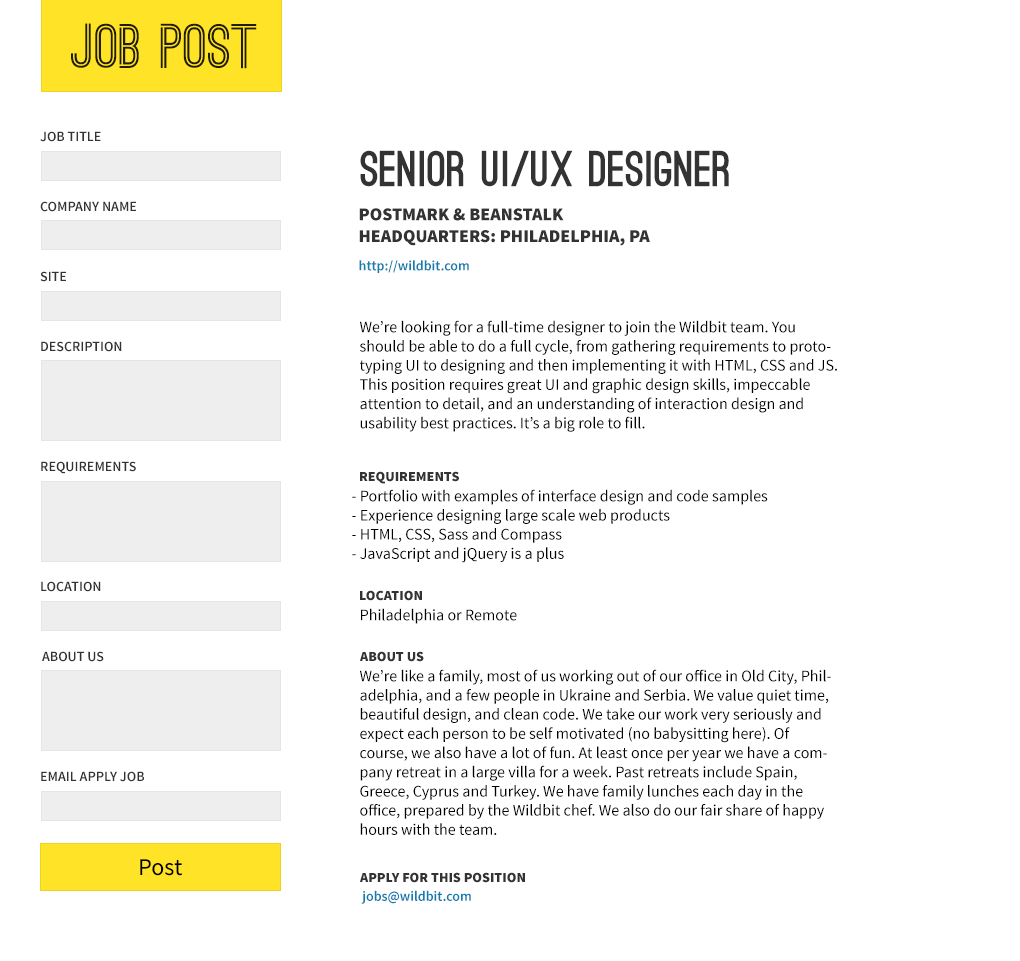
<style>
.page{position:relative;width:1020px;height:961px;background:#ffffff}
.page>*{position:absolute;margin:0}
.t1{font:60px "OstrichSans-Bold";color:#201c05}
.t2{font:14px "SourceSansPro-Semibold";color:#333333;text-transform:uppercase}
.t3{font:48px "OstrichSans-Black";color:#333333;text-transform:uppercase}
.t4{font:18px "SourceSansPro-Black";color:#333333;text-transform:uppercase}
.t5{font:14px "SourceSansPro-Semibold";color:#107caf}
.t6{font:16px "SourceSansPro-Regular";color:#000000}
.t7{font:14px "SourceSansPro-Black";color:#333333;text-transform:uppercase}
.t8{font:24px "SourceSansPro-Regular";color:#000000}
</style>
<div class="page">
<p class="t1" style="left:71px;top:23px;width:186px;height:46px">JOB POST</p>
<p class="t2" style="left:40px;top:131px;width:61px;height:11px">Job title</p>
<p class="t3" style="left:360px;top:150px;width:369px;height:37px">Senior UI/UX Designer</p>
<p class="t2" style="left:40px;top:201px;width:96px;height:11px">Company name</p>
<p class="t4" style="left:359px;top:208px;width:291px;height:38px">Postmark &amp; Beanstalk<br>Headquarters: Philadelphia, PA</p>
<p class="t5" style="left:359px;top:260px;width:110px;height:13px">http://wildbit.com</p>
<p class="t2" style="left:40px;top:271px;width:26px;height:11px">site</p>
<p class="t6" style="left:359px;top:320px;width:478px;height:112px">We’re looking for a full-time designer to join the Wildbit team. You should be able to do a full cycle, from gathering requirements to prototyping UI to designing and then implementing it with HTML, CSS and JS. This position requires great UI and graphic design skills, impeccable attention to detail, and an understanding of interaction design and usability best practices. It’s a big role to fill.</p>
<p class="t2" style="left:41px;top:341px;width:81px;height:11px">description</p>
<p class="t2" style="left:41px;top:461px;width:95px;height:13px">requirements</p>
<p class="t7" style="left:360px;top:471px;width:99px;height:13px">requirements</p>
<p class="t6" style="left:352px;top:489px;width:416px;height:74px">- Portfolio with examples of interface design and code samples<br>- Experience designing large scale web products<br>- HTML, CSS, Sass and Compass<br>- JavaScript and jQuery is a plus</p>
<p class="t2" style="left:41px;top:581px;width:60px;height:11px">location</p>
<p class="t7" style="left:360px;top:590px;width:62px;height:11px">location</p>
<p class="t6" style="left:361px;top:608px;width:156px;height:16px">Philadelphia or Remote</p>
<p class="t2" style="left:42px;top:651px;width:62px;height:11px">about us</p>
<p class="t7" style="left:359px;top:651px;width:65px;height:11px">about us</p>
<p class="t6" style="left:359px;top:669px;width:472px;height:166px">We’re like a family, most of us working out of our office in Old City, Philadelphia, and a few people in Ukraine and Serbia. We value quiet time, beautiful design, and clean code. We take our work very seriously and expect each person to be self motivated (no babysitting here). Of course, we also have a lot of fun. At least once per year we have a company retreat in a large villa for a week. Past retreats include Spain, Greece, Cyprus and Turkey. We have family lunches each day in the office, prepared by the Wildbit chef. We also do our fair share of happy hours with the team.</p>
<p class="t2" style="left:41px;top:771px;width:103px;height:11px">email apply job</p>
<p class="t8" style="left:140px;top:859px;width:42px;height:17px">Post</p>
<p class="t7" style="left:359px;top:872px;width:166px;height:11px">apply for this position</p>
<p class="t5" style="left:361px;top:890px;width:110px;height:14px">jobs@wildbit.com</p>
</div>
